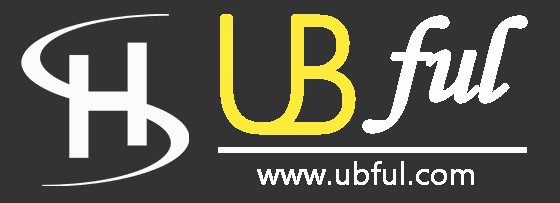
<style>
.page{position:relative;width:560px;height:203px;background:#333333}
.page>*{position:absolute;margin:0}
.t1{font:150px "MicrosoftYaHeiLight";letter-spacing:-0.05em;color:#ffeb3b;font-weight:bold}
.t2{font:120px "MonotypeCorsiva";letter-spacing:-0.05em;color:#fdfdfd;font-weight:bold}
.t3{font:30px "MicrosoftNewTaiLue";color:#fdfdfd;font-weight:bold}
</style>
<div class="page">
<p class="t1" style="left:220px;top:14px;width:84px;height:121px">U</p>
<p class="t2" style="left:362px;top:15px;width:166px;height:119px">ful</p>
<p class="t3" style="left:257px;top:161px;width:217px;height:24px">www.ubful.com</p>
</div>
